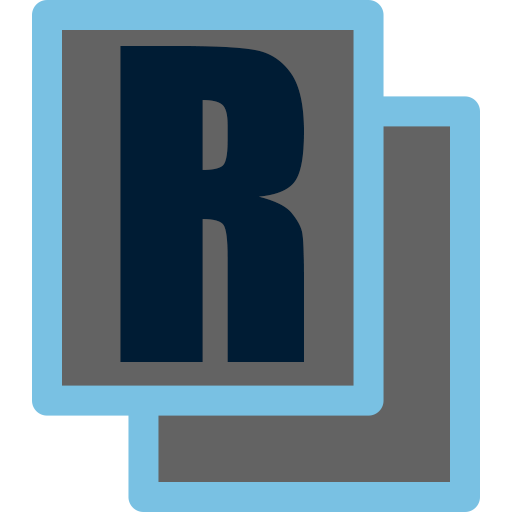
<style>
.page{position:relative;width:512px;height:512px;background:#636363}
.page>*{position:absolute;margin:0}
.t1{font:400px "Impact";color:#001c34}
</style>
<div class="page">
<p class="t1" style="left:120px;top:46px;width:184px;height:316px">R</p>
</div>
